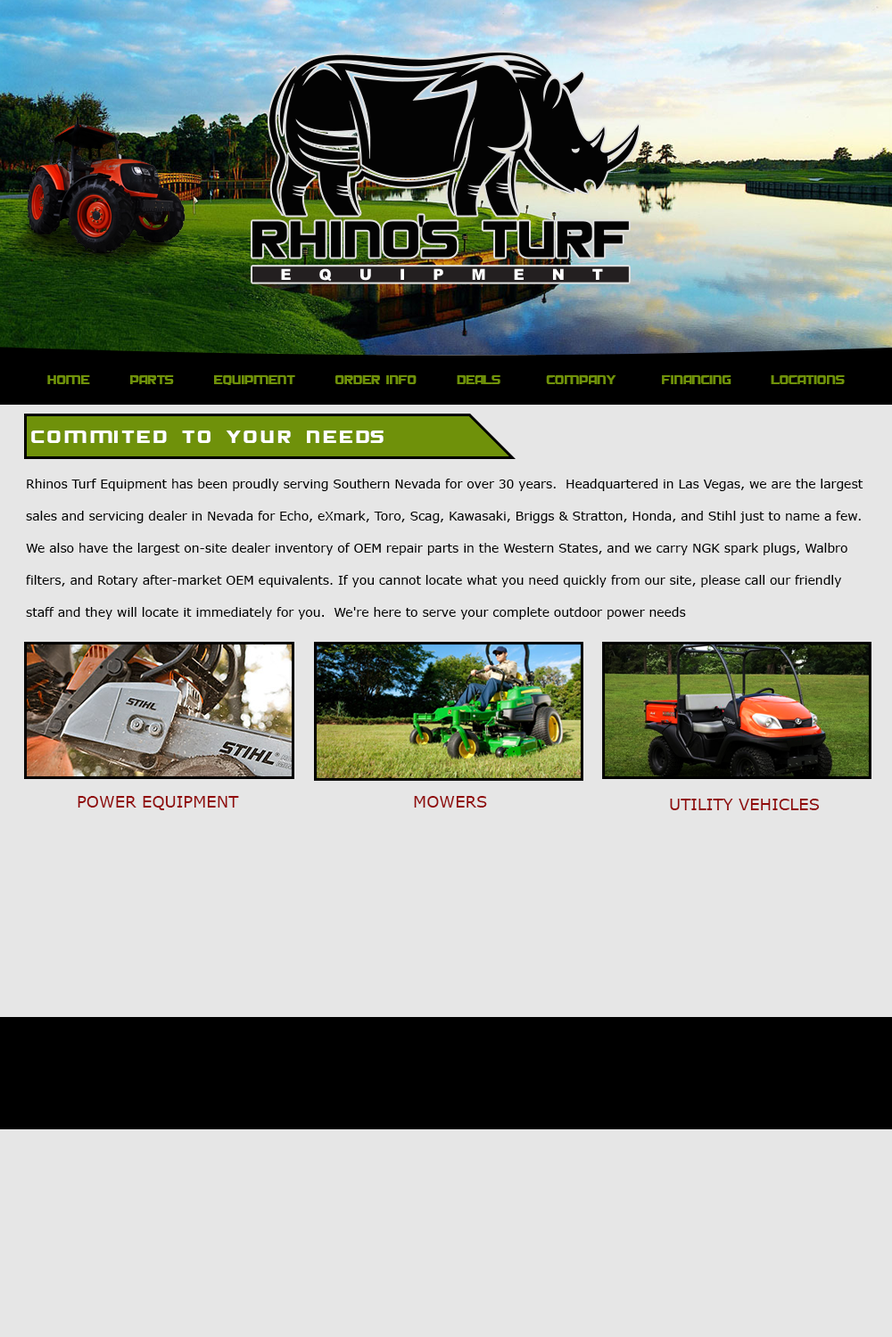
<style>
.page{position:relative;width:892px;height:1337px;background:#e6e6e6}
.page>*{position:absolute;margin:0}
.t1{font:10.7px "DieHundNormal";color:#6f910a}
.t2{font:16px "DieHundNormal";letter-spacing:0.2em;color:#ffffff}
.t3{font:12.5px/32.1px "Verdana";color:#000000}
.t4{font:16px "Verdana";color:#910a0a}
</style>
<div class="page">
<p class="t1" style="left:47px;top:375px;width:797px;height:10px">home       Parts       Equipment       Order Info       Deals        Company        Financing       Locations</p>
<p class="t2" style="left:31px;top:431px;width:352px;height:12px">COMMITED TO YOUR NEEDS</p>
<p class="t3" style="left:26px;top:479px;width:837px;height:141px">Rhinos Turf Equipment has been proudly serving Southern Nevada for over 30 years.  Headquartered in Las Vegas, we are the largest sales and servicing dealer in Nevada for Echo, eXmark, Toro, Scag, Kawasaki, Briggs &amp; Stratton, Honda, and Stihl just to name a few.  We also have the largest on-site dealer inventory of OEM repair parts in the Western States, and we carry NGK spark plugs, Walbro filters, and Rotary after-market OEM equivalents. If you cannot locate what you need quickly from our site, please call our friendly staff and they will locate it immediately for you.  We're here to serve your complete outdoor power needs</p>
<p class="t4" style="left:78px;top:796px;width:161px;height:14px">POWER EQUIPMENT</p>
<p class="t4" style="left:414px;top:796px;width:73px;height:12px">MOWERS</p>
<p class="t4" style="left:670px;top:799px;width:149px;height:11px">UTILITY VEHICLES</p>
</div>
